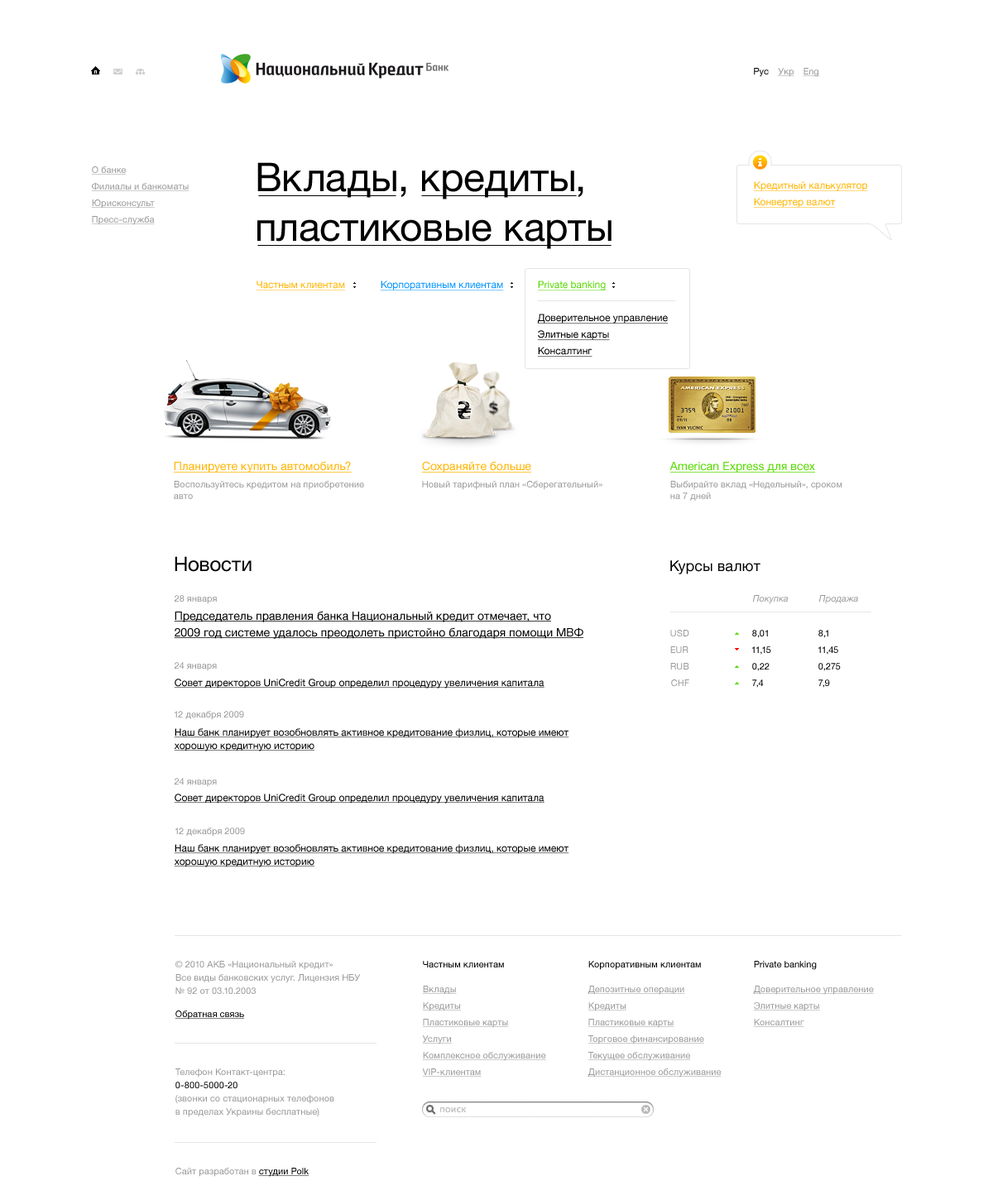
<style>
.page{position:relative;width:993px;height:1200px;background:#ffffff}
.page>*{position:absolute;margin:0}
.t1{font:9.1px "HelveticaNeue";color:#000000}
.t2{font:9.1px "HelveticaNeue";color:#999999;text-decoration:underline}
.t3{font:39.7px/49.7px "HelveticaNeue";color:#000000}
.t4{font:9.9px "HelveticaNeue";color:#ffb400;text-decoration:underline}
.t5{font:9.9px "HelveticaNeue";color:#0094ff;text-decoration:underline}
.t6{font:9.9px "HelveticaNeue";color:#57d900;text-decoration:underline}
.t7{font:9.9px "HelveticaNeue";color:#000000;text-decoration:underline}
.t8{font:11.6px "HelveticaNeue";color:#ffb400;text-decoration:underline}
.t9{font:11.6px "HelveticaNeue";color:#57d900;text-decoration:underline}
.t10{font:9.1px "HelveticaNeue";color:#999999}
.t11{font:19.9px "HelveticaNeue";color:#000000}
.t12{font:14.9px "HelveticaNeue";color:#000000}
.t13{font:9.1px "HelveticaNeue-Italic";color:#999999}
.t14{font:11.6px/16.6px "HelveticaNeue";color:#000000;text-decoration:underline}
.t15{font:9.9px/13.2px "HelveticaNeue";color:#000000;text-decoration:underline}
.t16{font:9.1px/13.2px "HelveticaNeue";color:#999999}
.t17{font:9.1px "HelveticaNeue";color:#000000;text-decoration:underline}
.t18{font:9.1px/13.2px "HelveticaNeue";color:#010101}
</style>
<div class="page">
<p class="t1" style="left:754px;top:68px;width:15px;height:9px">Рус</p>
<p class="t2" style="left:778px;top:68px;width:17px;height:9px">Укр</p>
<p class="t2" style="left:803px;top:68px;width:17px;height:9px">Eng</p>
<p class="t2" style="left:91px;top:166px;width:36px;height:9px">О банке</p>
<p class="t3" style="left:257px;top:162px;width:355px;height:87px">Вклады, кредиты,<br>пластиковые карты</p>
<p class="t2" style="left:91px;top:183px;width:99px;height:8px">Филиалы и банкоматы</p>
<p class="t4" style="left:753px;top:181px;width:115px;height:10px">Кредитный калькулятор</p>
<p class="t4" style="left:753px;top:198px;width:83px;height:10px">Конвертер валют</p>
<p class="t2" style="left:91px;top:200px;width:64px;height:9px">Юрисконсульт</p>
<p class="t2" style="left:91px;top:216px;width:64px;height:9px">Пресс-служба</p>
<p class="t4" style="left:256px;top:281px;width:89px;height:10px">Частным клиентам</p>
<p class="t5" style="left:380px;top:281px;width:124px;height:10px">Корпоративным клиентам</p>
<p class="t6" style="left:537px;top:281px;width:70px;height:10px">Private banking</p>
<p class="t7" style="left:537px;top:314px;width:131px;height:10px">Доверительное управление</p>
<p class="t7" style="left:537px;top:330px;width:73px;height:10px">Элитные карты</p>
<p class="t7" style="left:537px;top:347px;width:56px;height:10px">Консалтинг</p>
<p class="t8" style="left:173px;top:461px;width:179px;height:12px">Планируете купить автомобиль?</p>
<p class="t8" style="left:421px;top:461px;width:110px;height:12px">Сохраняйте больше</p>
<p class="t9" style="left:670px;top:462px;width:145px;height:11px">American Express для всех</p>
<p class="t10" style="left:174px;top:481px;width:190px;height:18px">Воспользуйтесь кредитом на приобретение<br>авто</p>
<p class="t10" style="left:422px;top:481px;width:181px;height:9px">Новый тарифный план «Сберегательный»</p>
<p class="t10" style="left:671px;top:481px;width:172px;height:20px">Выбирайте вклад «Недельный», сроком<br>на 7 дней</p>
<p class="t11" style="left:175px;top:556px;width:77px;height:16px">Новости</p>
<p class="t12" style="left:671px;top:560px;width:90px;height:15px">Курсы валют</p>
<p class="t10" style="left:174px;top:595px;width:43px;height:9px">28 января</p>
<p class="t13" style="left:752px;top:595px;width:36px;height:9px">Покупка</p>
<p class="t13" style="left:819px;top:595px;width:39px;height:9px">Продажа</p>
<p class="t14" style="left:174px;top:611px;width:410px;height:28px">Председатель правления банка Национальный кредит отмечает, что<br>2009 год системе удалось преодолеть пристойно благодаря помощи МВФ</p>
<p class="t10" style="left:671px;top:630px;width:19px;height:7px">USD</p>
<p class="t1" style="left:752px;top:630px;width:16px;height:8px">8,01</p>
<p class="t1" style="left:819px;top:630px;width:10px;height:8px">8,1</p>
<p class="t10" style="left:671px;top:647px;width:18px;height:6px">EUR</p>
<p class="t1" style="left:752px;top:647px;width:20px;height:8px">11,15</p>
<p class="t1" style="left:818px;top:647px;width:21px;height:8px">11,45</p>
<p class="t10" style="left:174px;top:662px;width:43px;height:9px">24 января</p>
<p class="t10" style="left:671px;top:663px;width:19px;height:7px">RUB</p>
<p class="t1" style="left:752px;top:663px;width:18px;height:8px">0,22</p>
<p class="t1" style="left:819px;top:663px;width:22px;height:8px">0,275</p>
<p class="t7" style="left:174px;top:679px;width:371px;height:10px">Совет директоров UniCredit Group определил процедуру увеличения капитала</p>
<p class="t10" style="left:671px;top:680px;width:19px;height:6px">CHF</p>
<p class="t1" style="left:752px;top:680px;width:12px;height:8px">7,4</p>
<p class="t1" style="left:819px;top:680px;width:11px;height:8px">7,9</p>
<p class="t10" style="left:174px;top:711px;width:70px;height:9px">12 декабря 2009</p>
<p class="t15" style="left:174px;top:728px;width:396px;height:24px">Наш банк планирует возобновлять активное кредитование физлиц, которые имеют<br>хорошую кредитную историю</p>
<p class="t10" style="left:174px;top:778px;width:43px;height:9px">24 января</p>
<p class="t7" style="left:174px;top:794px;width:371px;height:10px">Совет директоров UniCredit Group определил процедуру увеличения капитала</p>
<p class="t10" style="left:175px;top:828px;width:70px;height:9px">12 декабря 2009</p>
<p class="t15" style="left:174px;top:844px;width:396px;height:24px">Наш банк планирует возобновлять активное кредитование физлиц, которые имеют<br>хорошую кредитную историю</p>
<p class="t16" style="left:176px;top:961px;width:185px;height:33px">© 2010 АКБ «Национальный кредит»<br>Все виды банковских услуг. Лицензия НБУ<br>№ 92 от 03.10.2003</p>
<p class="t1" style="left:423px;top:961px;width:81px;height:7px">Частным клиентам</p>
<p class="t1" style="left:589px;top:961px;width:112px;height:9px">Корпоративным клиентам</p>
<p class="t1" style="left:754px;top:961px;width:63px;height:9px">Private banking</p>
<p class="t2" style="left:422px;top:986px;width:35px;height:8px">Вклады</p>
<p class="t2" style="left:588px;top:986px;width:97px;height:9px">Депозитные операции</p>
<p class="t2" style="left:753px;top:986px;width:121px;height:9px">Доверительное управление</p>
<p class="t17" style="left:175px;top:1011px;width:69px;height:9px">Обратная связь</p>
<p class="t2" style="left:422px;top:1003px;width:39px;height:9px">Кредиты</p>
<p class="t2" style="left:588px;top:1003px;width:39px;height:9px">Кредиты</p>
<p class="t2" style="left:753px;top:1003px;width:67px;height:9px">Элитные карты</p>
<p class="t2" style="left:422px;top:1019px;width:87px;height:9px">Пластиковые карты</p>
<p class="t2" style="left:588px;top:1019px;width:87px;height:9px">Пластиковые карты</p>
<p class="t2" style="left:753px;top:1019px;width:52px;height:8px">Консалтинг</p>
<p class="t2" style="left:422px;top:1036px;width:30px;height:9px">Услуги</p>
<p class="t2" style="left:588px;top:1036px;width:116px;height:9px">Торговое финансирование</p>
<p class="t2" style="left:422px;top:1052px;width:124px;height:9px">Комплексное обслуживание</p>
<p class="t2" style="left:588px;top:1052px;width:103px;height:9px">Текущее обслуживание</p>
<p class="t16" style="left:176px;top:1069px;width:158px;height:49px">Телефон Контакт-центра:<br><span class="t18">0-800-5000-20<br></span>(звонки со стационарных телефонов<br>в пределах Украины бесплатные)</p>
<p class="t2" style="left:422px;top:1069px;width:60px;height:8px">VIP-клиентам</p>
<p class="t2" style="left:588px;top:1069px;width:134px;height:9px">Дистанционное обслуживание</p>
<p class="t10" style="left:176px;top:1168px;width:133px;height:9px">Сайт разработан в <span class="t17">студии Polk</span></p>
</div>
